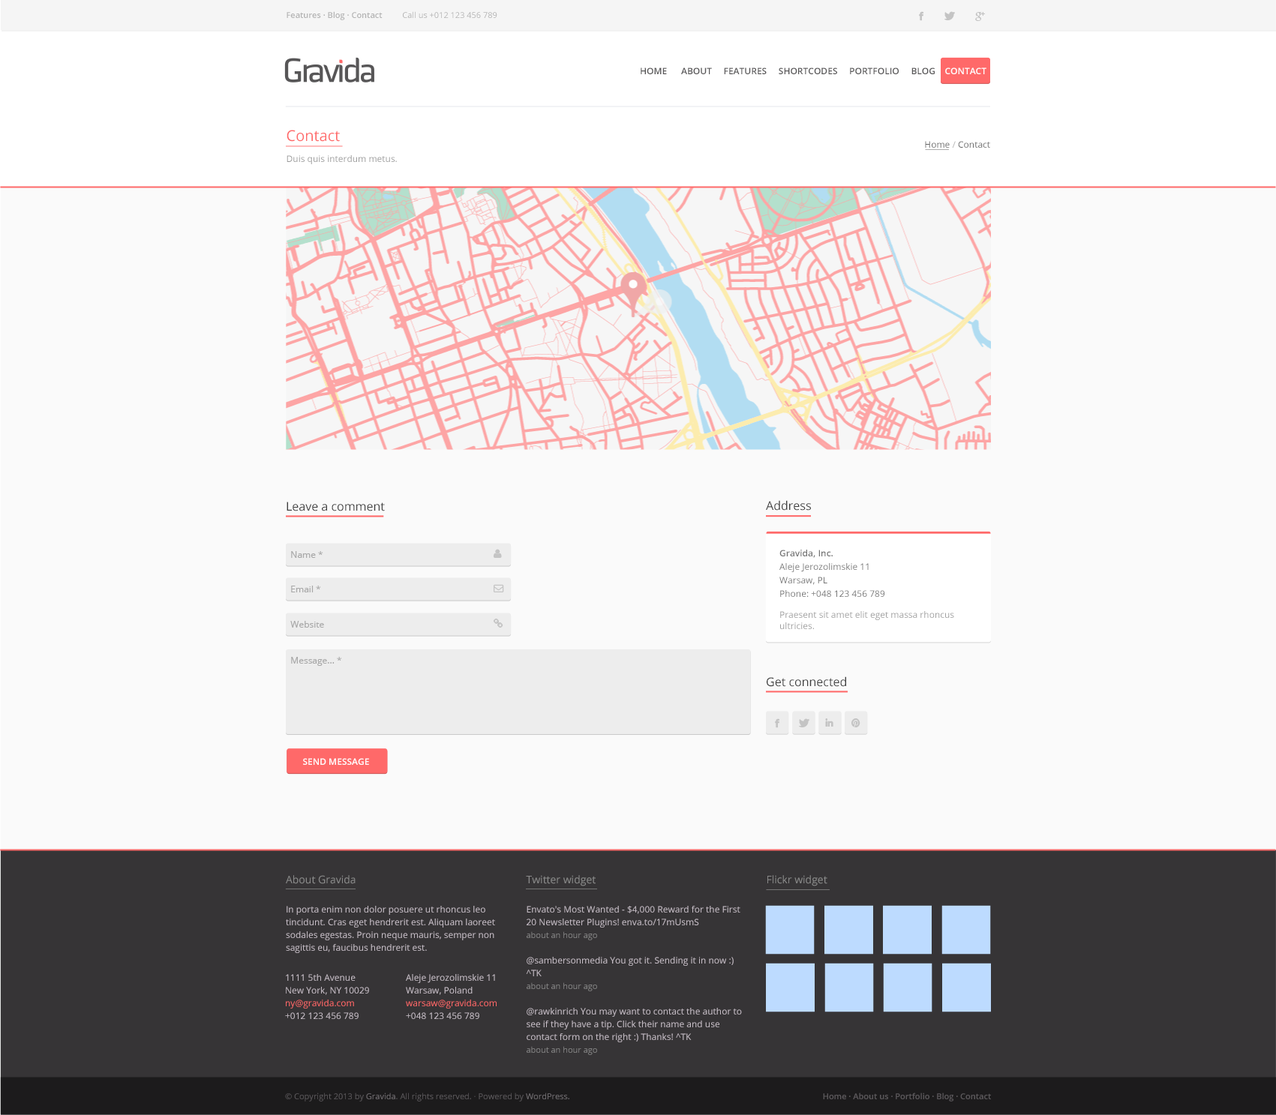
<style>
.page{position:relative;width:1276px;height:1115px;background:#fafafa}
.page>*{position:absolute;margin:0}
.t1{font:8.2px "OpenSans-Semibold";color:#b3b3b3}
.t2{font:8.2px "OpenSans";color:#b3b3b3}
.t3{font:9px "OpenSans-Semibold";color:#575657;text-transform:uppercase}
.t4{font:9px "OpenSans-Semibold";color:#ffffff;text-transform:uppercase}
.t5{font:9px/11.2px "OpenSans";color:#999999}
.t6{font:15px/20.2px "OpenSans";color:#ff6969}
.t7{font:9px "OpenSans";color:#666666}
.t8{font:9px "OpenSans";color:#b3b3b3}
.t9{font:12px "OpenSans";color:#3d3d3d}
.t10{font:9px "OpenSans";color:#a8a8a8}
.t11{font:9px/13.5px "OpenSans";color:#757575}
.t12{font:9px/13.5px "OpenSans-Semibold";color:#757575}
.t13{font:9px "OpenSans";color:#9e9e9e}
.t14{font:10.5px "OpenSans";color:#8a8a8a}
.t15{font:9px/12.8px "OpenSans";color:#c7bec7}
.t16{font:8.2px/12.8px "OpenSans";color:#878787}
.t17{font:9px/12.8px "OpenSans";color:#ff6969}
.t18{font:8.2px "OpenSans";color:#5c595c}
.t19{font:8.2px "OpenSans";color:#757175}
.t20{font:8.2px "ArialMT";color:#5c595c}
.t21{font:8.2px "OpenSans-Semibold";color:#5c595c}
</style>
<div class="page">
<p class="t1" style="left:286px;top:11px;width:96px;height:9px">Features · Blog · Contact</p>
<p class="t2" style="left:403px;top:11px;width:94px;height:7px">Call us +012 123 456 789</p>
<p class="t3" style="left:640px;top:68px;width:346px;height:6px">Home      About     Features     Shortcodes     Portfolio     Blog    <span class="t4">Contact</span></p>
<p class="t5" style="left:286px;top:130px;width:111px;height:34px"><span class="t6">Contact<br><br></span>Duis quis interdum metus.</p>
<p class="t7" style="left:925px;top:141px;width:65px;height:7px">Home <span class="t8">/ </span>Contact</p>
<p class="t9" style="left:286px;top:502px;width:99px;height:10px">Leave a comment</p>
<p class="t9" style="left:766px;top:500px;width:45px;height:11px">Address</p>
<p class="t10" style="left:291px;top:551px;width:32px;height:7px">Name *</p>
<p class="t11" style="left:779px;top:550px;width:175px;height:79px"><span class="t12">Gravida, Inc.<br></span>Aleje Jerozolimskie 11<br>Warsaw, PL<br>Phone: +048 123 456 789<br><span class="t13"><br>Praesent sit amet elit eget massa rhoncus ultricies.</span></p>
<p class="t10" style="left:291px;top:586px;width:30px;height:6px">Email *</p>
<p class="t10" style="left:290px;top:621px;width:34px;height:7px">Website</p>
<p class="t10" style="left:291px;top:657px;width:51px;height:9px">Message... *</p>
<p class="t9" style="left:766px;top:676px;width:80px;height:11px">Get connected</p>
<p class="t4" style="left:303px;top:758px;width:66px;height:7px">send message</p>
<p class="t14" style="left:286px;top:875px;width:70px;height:9px">About Gravida</p>
<p class="t14" style="left:526px;top:875px;width:70px;height:11px">Twitter widget</p>
<p class="t14" style="left:767px;top:875px;width:60px;height:11px">Flickr widget</p>
<p class="t15" style="left:286px;top:906px;width:209px;height:47px">In porta enim non dolor posuere ut rhoncus leo tincidunt. Cras eget hendrerit est. Aliquam laoreet sodales egestas. Proin neque mauris, semper non sagittis eu, faucibus hendrerit est.</p>
<p class="t15" style="left:526px;top:906px;width:216px;height:149px">Envato's Most Wanted - $4,000 Reward for the First 20 Newsletter Plugins! enva.to/17mUsmS<br><span class="t16">about an hour ago<br><br></span>@sambersonmedia You got it. Sending it in now :) ^TK<br><span class="t16">about an hour ago<br><br></span>@rawkinrich You may want to contact the author to see if they have a tip. Click their name and use contact form on the right :) Thanks! ^TK<br><span class="t16">about an hour ago</span></p>
<p class="t15" style="left:285px;top:974px;width:84px;height:45px">1111 5th Avenue<br>New York, NY 10029<br><span class="t17">ny@gravida.com<br></span>+012 123 456 789</p>
<p class="t15" style="left:406px;top:974px;width:90px;height:45px">Aleje Jerozolimskie 11<br>Warsaw, Poland<br><span class="t17">warsaw@gravida.com<br></span>+048 123 456 789</p>
<p class="t18" style="left:285px;top:1093px;width:284px;height:9px">© Copyright 2013 by <span class="t19">Gravida</span>. All rights reserved. <span class="t20">∙</span> Powered by <span class="t19">WordPress.</span></p>
<p class="t21" style="left:823px;top:1093px;width:168px;height:9px">Home · About us · Portfolio · Blog · Contact</p>
</div>
